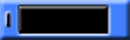
<style>
.page{position:relative;width:130px;height:40px;background:#000000}
.page>*{position:absolute;margin:0}
.t1{font:18px "GothicXB-HM";scale:0.87 1}
</style>
<div class="page">
<p class="t1" style="left:6px;top:12px;width:4px;height:15px">I</p>
</div>
